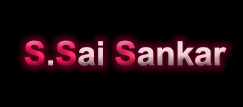
<style>
.page{position:relative;width:243px;height:107px;background:#000000}
.page>*{position:absolute;margin:0}
.t1{font:33.3px "Arial-BoldMT"}
</style>
<div class="page">
<p class="t1" style="left:24px;top:40px;width:203px;height:26px">S.Sai Sankar</p>
</div>
